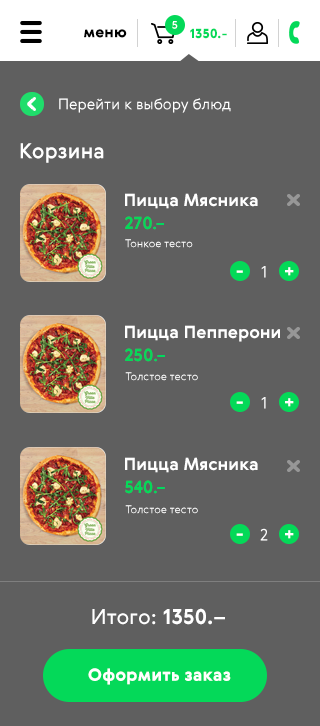
<style>
.page{position:relative;width:320px;height:726px;background:#5f5f5f}
.page>*{position:absolute;margin:0}
.t1{font:15px "Gerbera-Black";color:#000000}
.t2{font:11px "Gerbera-Medium";color:#ffffff}
.t3{font:13px "Gerbera-Black";color:#04d959}
.t4{font:15px "Gerbera-Light";color:#ffffff}
.t5{font:21px "Gerbera-Medium";color:#ffffff}
.t6{font:17px "Gerbera-Bold";color:#ffffff}
.t7{font:17px "Gerbera-Bold";color:#04d959}
.t8{font:17px "PTSans-Bold";color:#01d95e}
.t9{font:11px "Gerbera-Light";color:#ffffff}
.t10{font:17.8px "Gerbera-Black";color:#ffffff}
.t11{font:16.2px "Gerbera-Light";color:#ffffff}
.t12{font:21px "Gerbera";color:#ffffff}
.t13{font:21px "Gerbera-Bold";color:#ffffff}
.t14{font:17px "Gerbera-Black";color:#ffffff}
</style>
<div class="page">
<p class="t1" style="left:84px;top:29px;width:43px;height:9px">меню</p>
<p class="t2" style="left:172px;top:21px;width:6px;height:8px">5</p>
<p class="t3" style="left:190px;top:28px;width:37px;height:11px">1350.-</p>
<p class="t4" style="left:59px;top:98px;width:172px;height:15px">Перейти к выбору блюд</p>
<p class="t5" style="left:20px;top:143px;width:84px;height:20px">Корзина</p>
<p class="t6" style="left:125px;top:193px;width:133px;height:16px">Пицца Мясника</p>
<p class="t7" style="left:125px;top:216px;width:39px;height:14px">270<span class="t8">.–</span></p>
<p class="t9" style="left:125px;top:239px;width:68px;height:9px">Тонкое тесто</p>
<p class="t10" style="left:236px;top:270px;width:7px;height:3px">-</p>
<p class="t11" style="left:261px;top:266px;width:5px;height:12px">1</p>
<p class="t10" style="left:285px;top:267px;width:9px;height:9px">+</p>
<p class="t6" style="left:125px;top:325px;width:155px;height:17px">Пицца Пепперони</p>
<p class="t7" style="left:125px;top:348px;width:40px;height:14px">250<span class="t8">.–</span></p>
<p class="t9" style="left:125px;top:372px;width:73px;height:9px">Толстое тесто</p>
<p class="t10" style="left:236px;top:401px;width:7px;height:3px">-</p>
<p class="t11" style="left:261px;top:397px;width:5px;height:12px">1</p>
<p class="t10" style="left:285px;top:398px;width:9px;height:9px">+</p>
<p class="t6" style="left:125px;top:457px;width:133px;height:16px">Пицца Мясника</p>
<p class="t7" style="left:125px;top:480px;width:40px;height:14px">540<span class="t8">.–</span></p>
<p class="t9" style="left:125px;top:505px;width:73px;height:9px">Толстое тесто</p>
<p class="t10" style="left:236px;top:533px;width:7px;height:3px">-</p>
<p class="t11" style="left:260px;top:528px;width:8px;height:13px">2</p>
<p class="t10" style="left:285px;top:530px;width:9px;height:9px">+</p>
<p class="t12" style="left:92px;top:608px;width:133px;height:17px">Итого: <span class="t13">1350.–</span></p>
<p class="t14" style="left:88px;top:668px;width:143px;height:17px">Оформить заказ</p>
</div>
